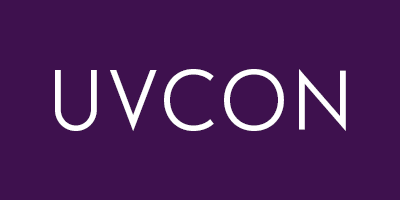
<style>
.page{position:relative;width:400px;height:200px;background:#3e114e}
.page>*{position:absolute;margin:0}
.t1{font:74.1px "Edelsans";letter-spacing:0.05em;color:#ffffff}
</style>
<div class="page">
<p class="t1" style="left:55px;top:69px;width:291px;height:62px">UVCON</p>
</div>
